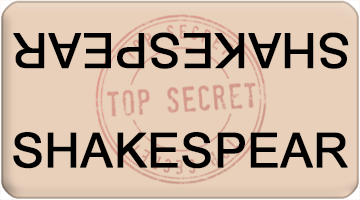
<style>
.page{position:relative;width:360px;height:200px;background:#e8d0bb}
.page>*{position:absolute;margin:0}
.t1{font:48px "ArialMT";color:#000000;font-weight:bold}
</style>
<div class="page">
<p class="t1" style="left:13px;top:32px;width:336px;height:37px;rotate:180deg">SHAKESPEARE</p>
<p class="t1" style="left:13px;top:132px;width:335px;height:37px">SHAKESPEARE</p>
</div>
